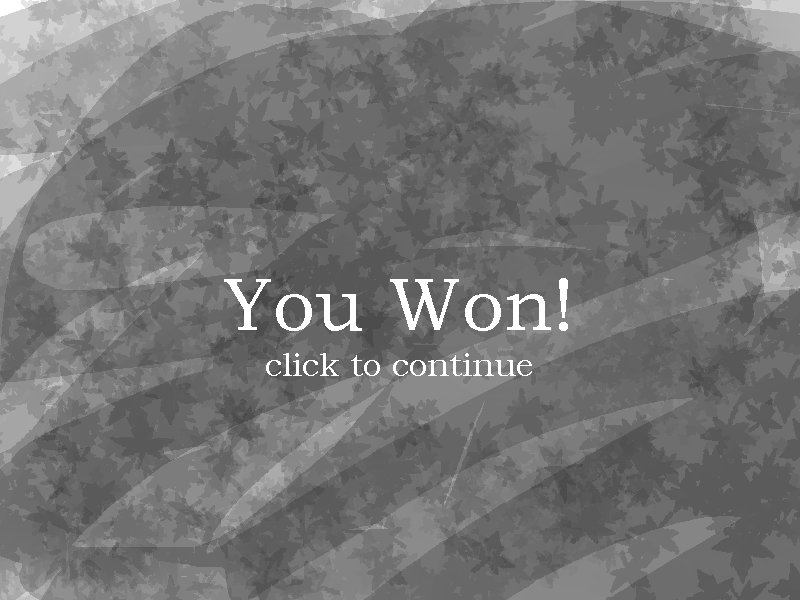
<style>
.page{position:relative;width:800px;height:600px}
.page>*{position:absolute;margin:0}
.t1{font:75px "BookmanOldStyle";color:#ffffff}
.t2{font:33.3px "BookmanOldStyle";color:#ffffff}
</style>
<div class="page">
<p class="t1" style="left:224px;top:278px;width:344px;height:53px">You Won!</p>
<p class="t2" style="left:266px;top:353px;width:266px;height:23px">click to continue</p>
</div>
